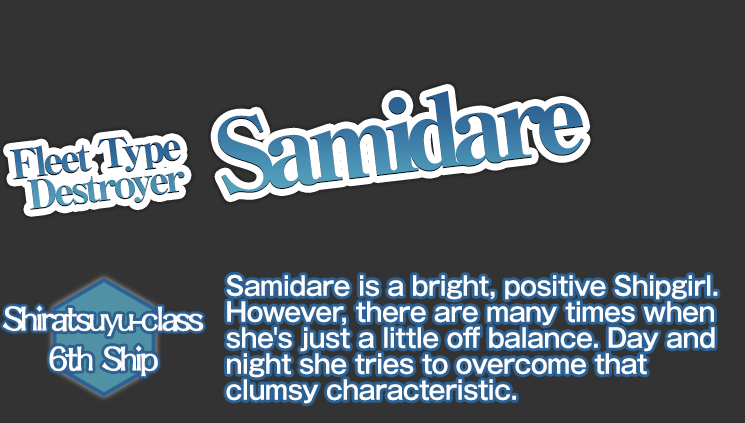
<style>
.page{position:relative;width:745px;height:423px;background:#333333}
.page>*{position:absolute;margin:0}
.t1{font:100px "RyuminPro-ExHeavy";letter-spacing:-0.1em;color:#4081a9}
.t2{font:40px/32px "RyuminPro-ExHeavy";letter-spacing:-0.08em}
.t3{font:26px/26px "GothicMB101Pro-DeBold";letter-spacing:-0.02em;color:#fdfdfd;scale:0.95 1}
.t4{font:40px/40px "DFLungMen-W9-WINP-BF";letter-spacing:-0.09em;color:#fdfdfd}
</style>
<div class="page">
<p class="t1" style="left:217px;top:90px;width:367px;height:106px;rotate:-7deg">Samidare</p>
<p class="t2" style="left:10px;top:136px;width:175px;height:74px;text-align:right;rotate:-7deg">Fleet Type<br>Destroyer</p>
<p class="t3" style="left:226px;top:274px;width:492px;height:130px">Samidare is a bright, positive Shipgirl.<br>However, there are many times when <br>she's just a little off balance. Day and <br>night she tries to overcome that<br>clumsy characteristic.</p>
<p class="t4" style="left:2px;top:305px;width:202px;height:72px;text-align:center">Shiratsuyu-class<br>6th Ship</p>
</div>
